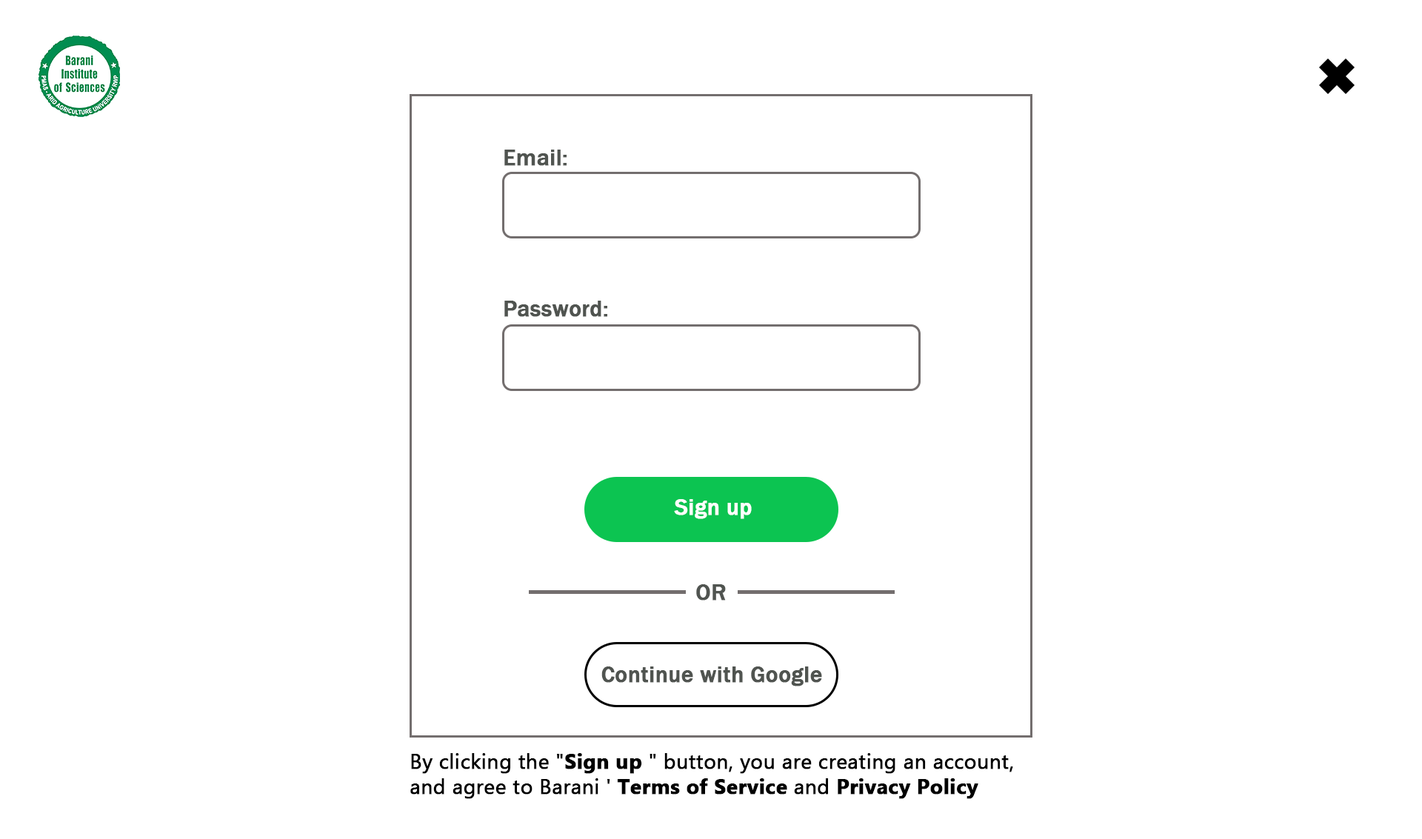
<style>
.page{position:relative;width:1422px;height:839px;background:#ffffff}
.page>*{position:absolute;margin:0}
.t1{font:23px "FranklinGothic-Medium";color:#505450;font-weight:bold}
.t2{font:23px "FranklinGothic-Medium";color:#ffffff;font-weight:bold}
.t3{font:20.7px "MicrosoftTaiLe";color:#000000;font-weight:bold}
.t4{font:20.7px "MicrosoftTaiLe-Bold";color:#000000;font-weight:bold}
</style>
<div class="page">
<p class="t1" style="left:504px;top:150px;width:62px;height:16px">Email:</p>
<p class="t1" style="left:504px;top:301px;width:103px;height:16px">Password:</p>
<p class="t2" style="left:674px;top:499px;width:77px;height:20px">Sign up</p>
<p class="t1" style="left:696px;top:584px;width:30px;height:16px">OR</p>
<p class="t1" style="left:601px;top:666px;width:221px;height:20px">Continue with Google</p>
<p class="t3" style="left:410px;top:753px;width:603px;height:46px">By clicking the "<span class="t4">Sign up</span> " button, you are creating an account, and agree to Barani ' <span class="t4">Terms of Service</span> and <span class="t4">Privacy Policy</span></p>
</div>
